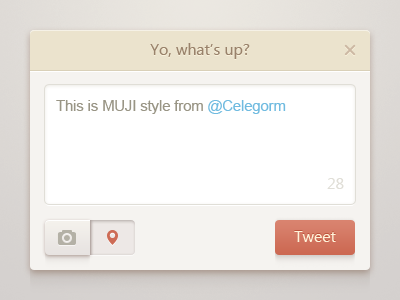
<style>
.page{position:relative;width:400px;height:300px;background:#ffffff}
.page>*{position:absolute;margin:0}
.t1{font:15.8px "Ebrima";color:#99826b}
.t2{font:14.6px "ArialMT";color:#999585}
.t3{font:14.6px "ArialMT";color:#70bbe0}
.t4{font:15.8px "Ebrima";color:#e0ded7}
.t5{font:15.8px "Ebrima";color:#fff2d9}
</style>
<div class="page">
<p class="t1" style="left:150px;top:43px;width:100px;height:16px">Yo, what’s up?</p>
<p class="t2" style="left:56px;top:100px;width:230px;height:14px">This is MUJI style from <span class="t3">@Celegorm</span></p>
<p class="t4" style="left:327px;top:178px;width:17px;height:11px">28</p>
<p class="t5" style="left:294px;top:231px;width:42px;height:11px">Tweet</p>
</div>
